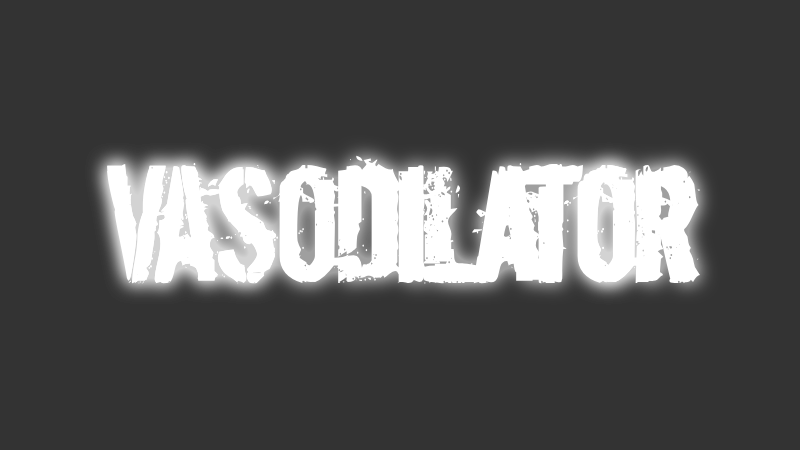
<style>
.page{position:relative;width:800px;height:450px;background:#333333}
.page>*{position:absolute;margin:0}
.t1{font:182px "DirtyEgo";color:#ffffff}
.t2{font:175.6px "DirtyEgo";color:#ffffff}
</style>
<div class="page">
<p class="t1" style="left:107px;top:155px;width:593px;height:128px">Vasodilator</p>
<p class="t2" style="left:107px;top:166px;width:584px;height:118px">VASODILATOR</p>
<p class="t1" style="left:107px;top:163px;width:548px;height:120px">Vasodilator</p>
</div>
